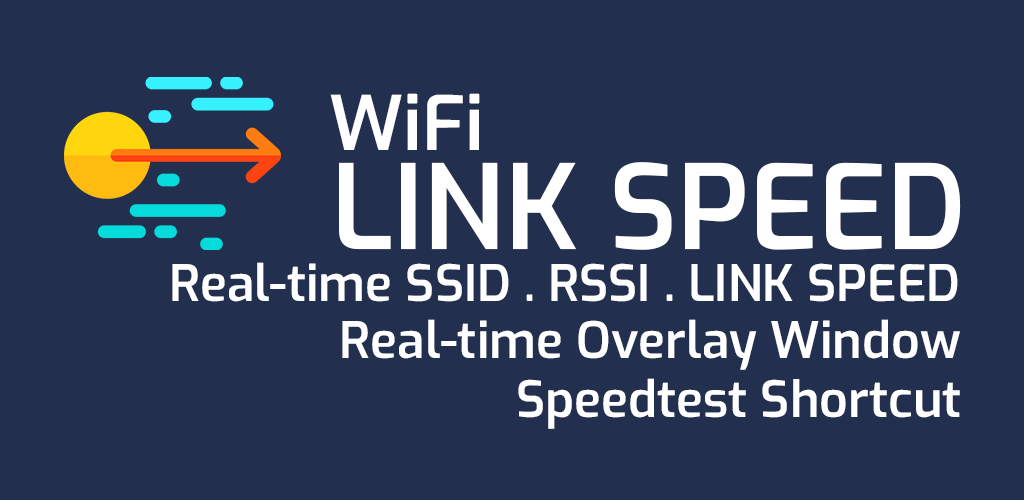
<style>
.page{position:relative;width:1024px;height:500px;background:#232f4e}
.page>*{position:absolute;margin:0}
.t1{font:75px "Exo-SemiBold";color:#ffffff}
.t2{font:116.7px "Exo-SemiBold";color:#ffffff}
.t3{font:50px "Exo-SemiBold";color:#ffffff}
</style>
<div class="page">
<p class="t1" style="left:330px;top:93px;width:150px;height:57px">WiFi</p>
<p class="t2" style="left:339px;top:162px;width:622px;height:88px">LINK SPEED</p>
<p class="t3" style="left:172px;top:262px;width:786px;height:40px">Real-time SSID . RSSI . LINK SPEED</p>
<p class="t3" style="left:342px;top:319px;width:618px;height:51px">Real-time Overlay Window</p>
<p class="t3" style="left:518px;top:378px;width:442px;height:51px">Speedtest Shortcut</p>
</div>
